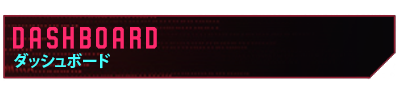
<style>
.page{position:relative;width:400px;height:95px;background:#ffffff}
.page>*{position:absolute;margin:0}
.t1{font:52.5px "Party-Lights-[WLM]-Flat";color:#ff296d}
.t2{font:15.7px "KozGoPr6N-Bold";color:#43ffff}
</style>
<div class="page">
<p class="t1" style="left:13px;top:27px;width:144px;height:22px">Dashboard</p>
<p class="t2" style="left:14px;top:53px;width:96px;height:16px">ダッシュボード</p>
</div>
